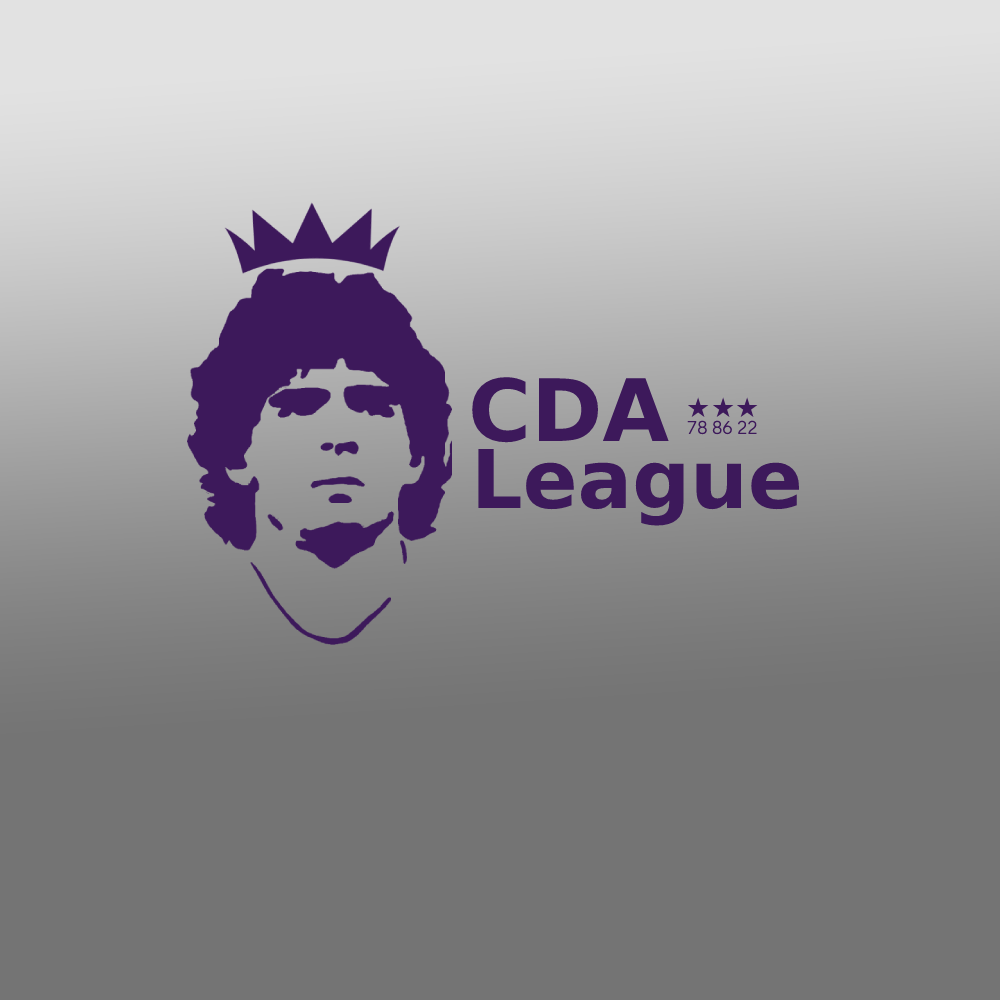
<style>
.page{position:relative;width:1000px;height:1000px;background:#747474}
.page>*{position:absolute;margin:0}
.t1{font:86px "PremierLeague-Bold";color:#3d195b}
.t2{font:27px "DejaVuSans";color:#3d195b}
.t3{font:19px "PremierLeague-Regular";color:#3d195b}
.t4{font:81px "PremierLeague-Bold";color:#3d195b}
</style>
<div class="page">
<p class="t1" style="left:472px;top:377px;width:197px;height:66px">CDA</p>
<p class="t2" style="left:688px;top:397px;width:21px;height:20px">★</p>
<p class="t2" style="left:713px;top:397px;width:21px;height:20px">★</p>
<p class="t2" style="left:737px;top:397px;width:21px;height:20px">★</p>
<p class="t3" style="left:687px;top:420px;width:70px;height:15px">78 86 22</p>
<p class="t4" style="left:478px;top:448px;width:321px;height:78px">League</p>
</div>
